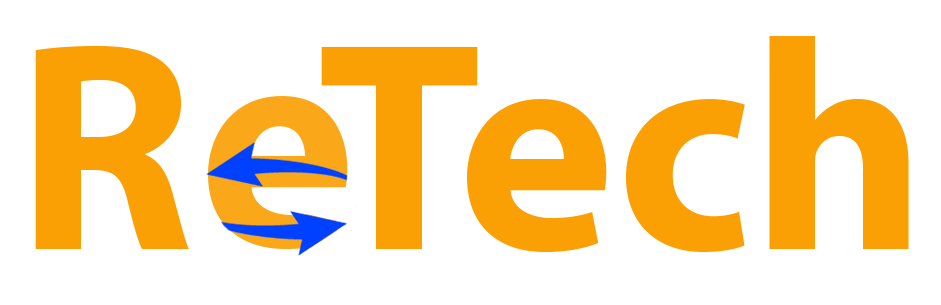
<style>
.page{position:relative;width:941px;height:305px;background:#ffffff}
.page>*{position:absolute;margin:0}
.t1{font:300px "MyriadPro-Bold";color:#faa005}
</style>
<div class="page">
<p class="t1" style="left:321px;top:36px;width:588px;height:217px">Tech</p>
<p class="t1" style="left:35px;top:45px;width:154px;height:204px">R</p>
</div>
